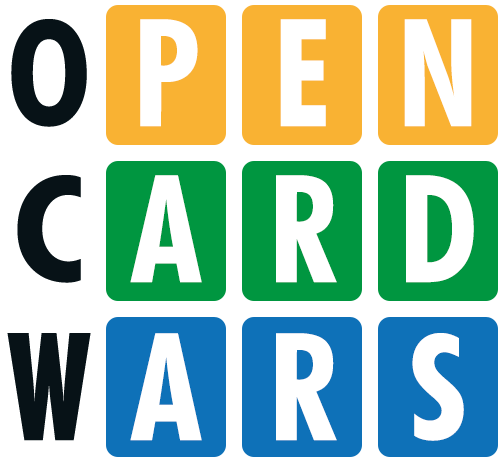
<style>
.page{position:relative;width:504px;height:462px;background:#ffffff}
.page>*{position:absolute;margin:0}
.t1{font:147px "FuturaBT-BoldCondensed";color:#071217}
.t2{font:150px "FuturaBT-BoldCondensed";color:#ffffff}
.t3{font:147px "FuturaBT-BoldCondensed";color:#071217;scale:1.1 1}
.t4{font:150px "Futura-Black-Bold";color:#071217;scale:0.54 1}
.t5{font:147px "FuturaBT-BoldCondensed";color:#ffffff}
</style>
<div class="page">
<p class="t1" style="left:11px;top:19px;width:76px;height:108px">O</p>
<p class="t2" style="left:140px;top:19px;width:58px;height:108px">P</p>
<p class="t2" style="left:280px;top:19px;width:46px;height:108px">E</p>
<p class="t2" style="left:404px;top:19px;width:68px;height:108px">N</p>
<p class="t3" style="left:17px;top:175px;width:64px;height:108px">C</p>
<p class="t2" style="left:130px;top:175px;width:72px;height:108px">A</p>
<p class="t2" style="left:276px;top:175px;width:61px;height:108px">R</p>
<p class="t2" style="left:406px;top:175px;width:68px;height:108px">D</p>
<p class="t4" style="left:7px;top:333px;width:84px;height:108px">W</p>
<p class="t2" style="left:130px;top:333px;width:72px;height:108px">A</p>
<p class="t2" style="left:276px;top:333px;width:61px;height:108px">R</p>
<p class="t5" style="left:412px;top:333px;width:52px;height:108px">S</p>
</div>
